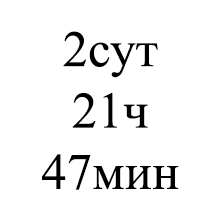
<style>
.page{position:relative;width:221px;height:221px;background:#ffffff}
.page>*{position:absolute;margin:0}
.t1{font:51.1px "TimesNewRomanPSMT";color:#000000}
</style>
<div class="page">
<p class="t1" style="left:42px;top:31px;width:137px;height:159px;text-align:center">2сут<br>21ч<br>47мин</p>
</div>
